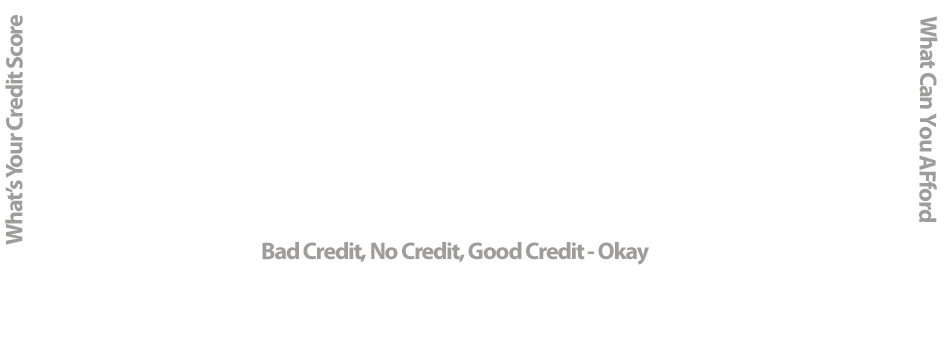
<style>
.page{position:relative;width:950px;height:350px;background:#ffffff}
.page>*{position:absolute;margin:0}
.t1{font:24px "MyriadPro-Bold";letter-spacing:-0.05em;color:#a19c9c}
</style>
<div class="page">
<p class="t1" style="left:5px;top:15px;width:18px;height:230px;rotate:-90deg">What’s Your Credit Score</p>
<p class="t1" style="left:919px;top:16px;width:19px;height:206px;rotate:90deg">What Can You AFford</p>
<p class="t1" style="left:262px;top:242px;width:387px;height:23px">Bad Credit, No Credit, Good Credit - Okay</p>
</div>
